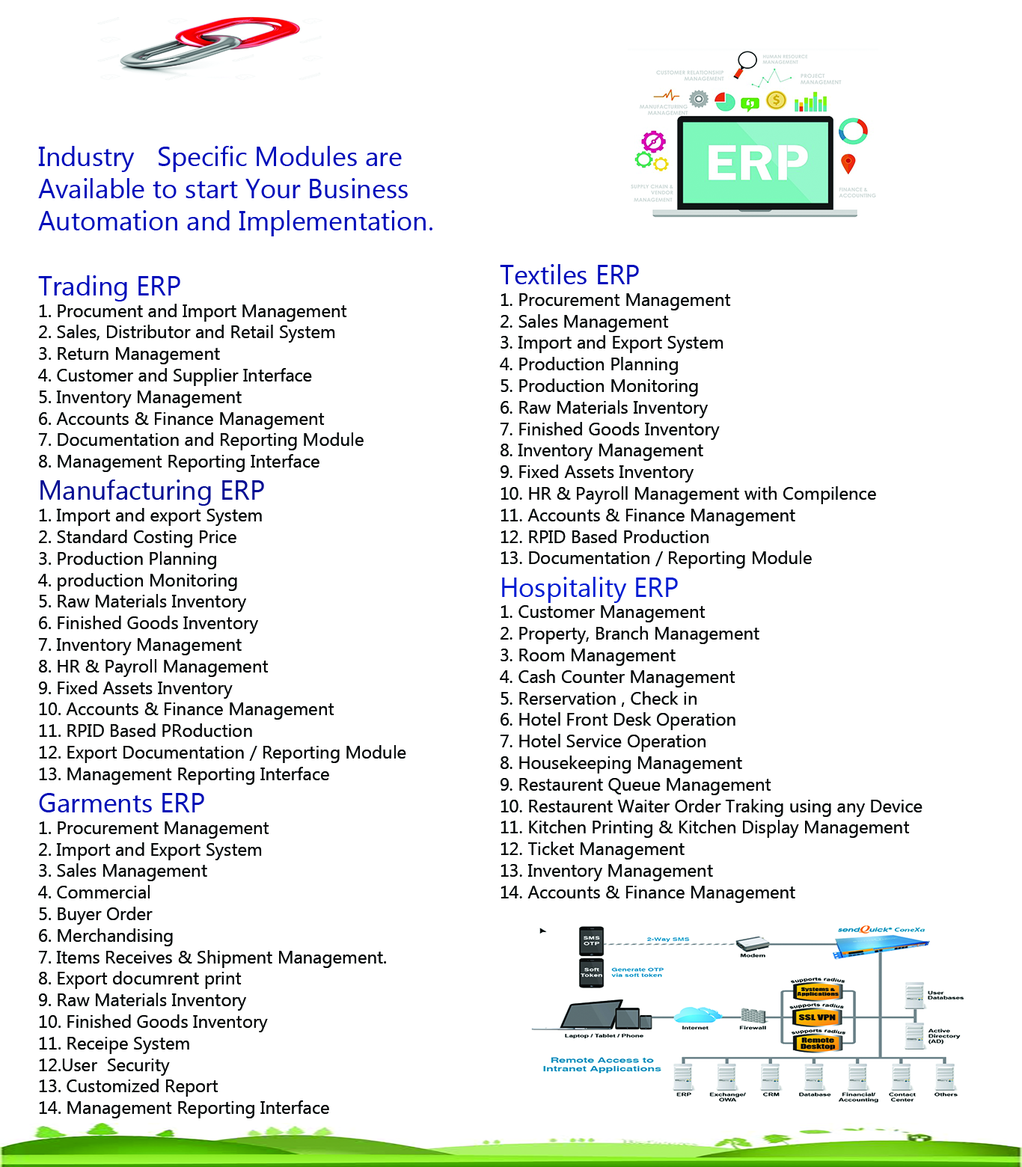
<style>
.page{position:relative;width:1022px;height:1167px;background:#ffffff}
.page>*{position:absolute;margin:0}
.t1{font:18px "MyanmarText";color:#070909}
.t2{font:26.9px "MyanmarText";color:#000dba}
.t3{font:26.9px "MyanmarText";color:#000b92}
.t4{font:26.9px "MyanmarText";color:#000eb4}
.t5{font:26.9px "MyanmarText";color:#001dd1}
</style>
<div class="page">
<p class="t1" style="left:38px;top:146px;width:394px;height:972px"><span class="t2">Industry   Specific Modules are<br>Available to start Your Business<br>Automation and Implementation.<br><br>Trading ERP<br></span>1. Procument and Import Management<br>2. Sales, Distributor and Retail System<br>3. Return Management<br>4. Customer and Supplier Interface<br>5. Inventory Management<br>6. Accounts &amp; Finance Management<br>7. Documentation and Reporting Module<br>8. Management Reporting Interface<br><span class="t3">Manufacturing ERP<br></span>1. Import and export System<br>2. Standard Costing Price<br>3. Production Planning<br>4. production Monitoring<br>5. Raw Materials Inventory<br>6. Finished Goods Inventory<br>7. Inventory Management<br>8. HR &amp; Payroll Management<br>9. Fixed Assets Inventory<br>10. Accounts &amp; Finance Management<br>11. RPID Based PRoduction<br>12. Export Documentation / Reporting Module<br>13. Management Reporting Interface<br><span class="t4">Garments ERP<br></span>1. Procurement Management<br>2. Import and Export System<br>3. Sales Management<br>4. Commercial<br>5. Buyer Order<br>6. Merchandising<br>7. Items Receives &amp; Shipment Management.<br>8. Export documrent print<br>9. Raw Materials Inventory<br>10. Finished Goods Inventory<br>11. Receipe System<br>12.User  Security<br>13. Customized Report<br>14. Management Reporting Interface</p>
<p class="t1" style="left:500px;top:264px;width:422px;height:639px"><span class="t2">Textiles ERP<br></span>1. Procurement Management<br>2. Sales Management<br>3. Import and Export System<br>4. Production Planning<br>5. Production Monitoring<br>6. Raw Materials Inventory<br>7. Finished Goods Inventory <br>8. Inventory Management<br>9. Fixed Assets Inventory<br>10. HR &amp; Payroll Management with Compilence<br>11. Accounts &amp; Finance Management<br>12. RPID Based Production<br>13. Documentation / Reporting Module<br><span class="t5">Hospitality ERP<br></span>1. Customer Management<br>2. Property, Branch Management<br>3. Room Management<br>4. Cash Counter Management<br>5. Rerservation , Check in<br>6. Hotel Front Desk Operation<br>7. Hotel Service Operation<br>8. Housekeeping Management<br>9. Restaurent Queue Management<br>10. Restaurent Waiter Order Traking using any Device<br>11. Kitchen Printing &amp; Kitchen Display Management<br>12. Ticket Management<br>13. Inventory Management<br>14. Accounts &amp; Finance Management</p>
</div>
